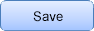
<style>
.page{position:relative;width:94px;height:31px}
.page>*{position:absolute;margin:0}
.t1{font:13.3px "ArialMT";color:#000000}
</style>
<div class="page">
<p class="t1" style="left:33px;top:11px;width:30px;height:11px">Save</p>
</div>
